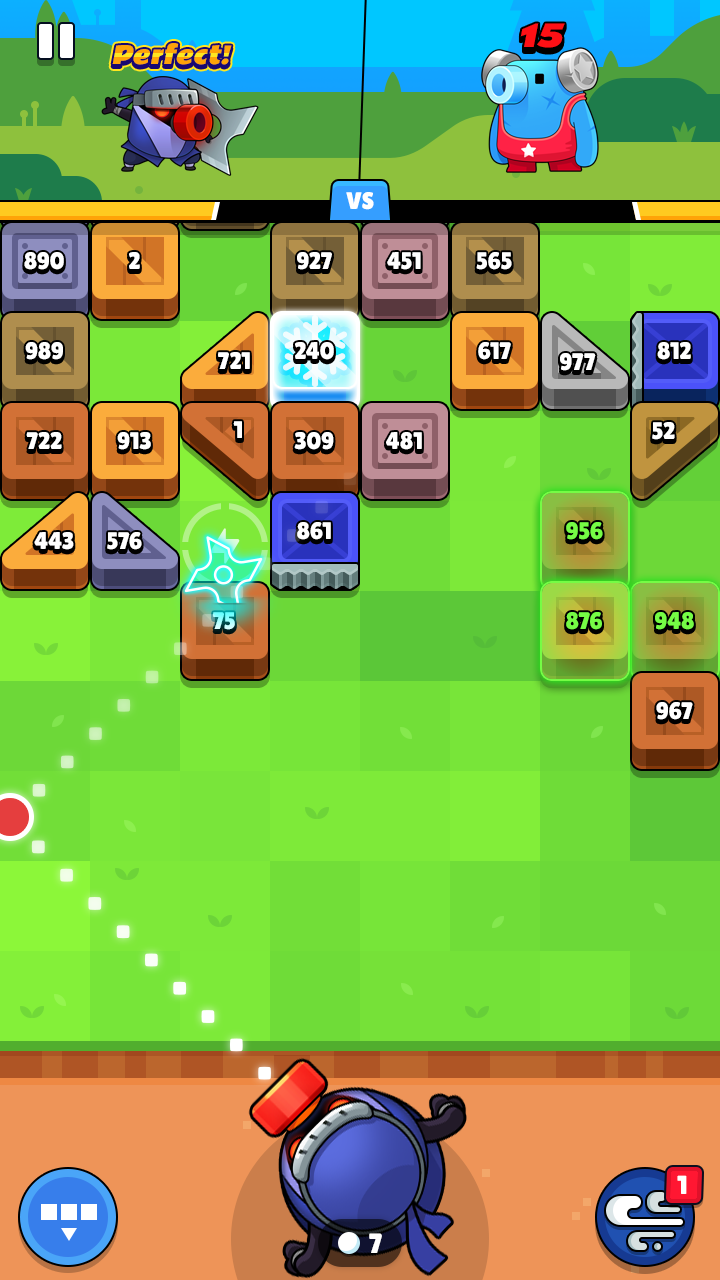
<style>
.page{position:relative;width:720px;height:1280px}
.page>*{position:absolute;margin:0}
.t1{font:30px "RammettoOne-Regular";font-style:italic}
.t2{font:30px "RammettoOne-Regular";color:#fe1015;font-style:italic}
.t3{font:23.8px "RammettoOne-Regular";color:#ffa308;font-style:italic}
.t4{font:24px "LilitaOne";color:#ffffff;text-transform:uppercase}
.t5{font:24px "LilitaOne";color:#ffffff}
.t6{font:24px "LilitaOne";letter-spacing:0.02em;color:#ffffff}
.t7{font:24px "LilitaOne";color:#75fc45}
.t8{font:24px "LilitaOne"}
.t9{font:26px "LilitaOne";color:#ffffff;text-transform:uppercase}
.t10{font:28px "LilitaOne";color:#ffffff}
</style>
<div class="page">
<p class="t1" style="left:520px;top:26px;width:45px;height:25px">15</p>
<p class="t2" style="left:520px;top:25px;width:45px;height:25px">15</p>
<p class="t2" style="left:520px;top:24px;width:45px;height:25px">15</p>
<p class="t2" style="left:520px;top:23px;width:45px;height:25px">15</p>
<p class="t3" style="left:112px;top:43px;width:120px;height:22px">Perfect!</p>
<p class="t4" style="left:346px;top:192px;width:28px;height:18px">VS</p>
<p class="t5" style="left:24px;top:252px;width:40px;height:18px">890</p>
<p class="t5" style="left:129px;top:252px;width:11px;height:17px">2</p>
<p class="t5" style="left:297px;top:252px;width:35px;height:18px">927</p>
<p class="t5" style="left:387px;top:252px;width:34px;height:18px">451</p>
<p class="t5" style="left:476px;top:252px;width:36px;height:18px">565</p>
<p class="t5" style="left:25px;top:342px;width:38px;height:18px">989</p>
<p class="t5" style="left:295px;top:342px;width:39px;height:18px">240</p>
<p class="t5" style="left:478px;top:342px;width:33px;height:18px">617</p>
<p class="t5" style="left:657px;top:342px;width:34px;height:18px">812</p>
<p class="t5" style="left:218px;top:352px;width:32px;height:17px">721</p>
<p class="t5" style="left:560px;top:353px;width:36px;height:18px">977</p>
<p class="t5" style="left:233px;top:421px;width:9px;height:17px">1</p>
<p class="t5" style="left:652px;top:422px;width:23px;height:18px">52</p>
<p class="t5" style="left:26px;top:432px;width:36px;height:17px">722</p>
<p class="t5" style="left:117px;top:432px;width:34px;height:18px">913</p>
<p class="t5" style="left:294px;top:432px;width:40px;height:18px">309</p>
<p class="t6" style="left:386px;top:432px;width:36px;height:18px">481</p>
<p class="t5" style="left:34px;top:532px;width:40px;height:18px">443</p>
<p class="t5" style="left:107px;top:532px;width:35px;height:18px">576</p>
<p class="t5" style="left:297px;top:522px;width:34px;height:18px">861</p>
<p class="t7" style="left:566px;top:522px;width:37px;height:18px">956</p>
<p class="t8" style="left:213px;top:612px;width:22px;height:18px">75</p>
<p class="t7" style="left:566px;top:612px;width:36px;height:18px">876</p>
<p class="t7" style="left:655px;top:612px;width:39px;height:18px">948</p>
<p class="t5" style="left:656px;top:702px;width:37px;height:18px">967</p>
<p class="t9" style="left:677px;top:1175px;width:10px;height:19px">1</p>
<p class="t10" style="left:369px;top:1233px;width:13px;height:20px">7</p>
</div>
